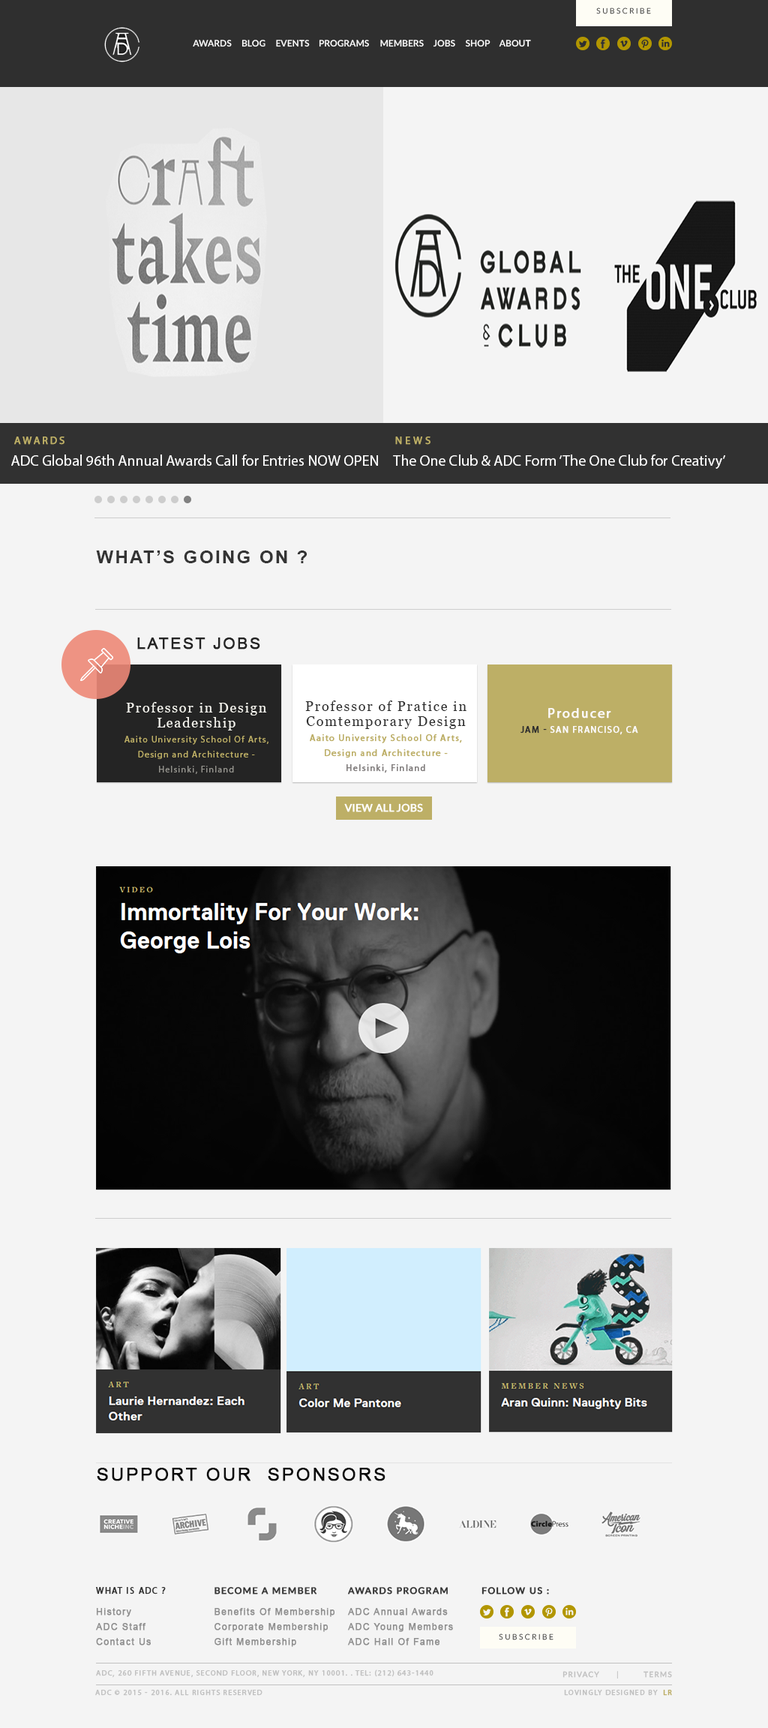
<style>
.page{position:relative;width:768px;height:1728px;background:#f4f4f4}
.page>*{position:absolute;margin:0}
.t1{font:7.5px "Lato-Light";letter-spacing:0.26em;color:#454545;text-transform:uppercase}
.t2{font:9px "Lato-Bold";color:#ffffff;text-transform:uppercase}
.t3{font:10.5px "MyriadPro-Regular";letter-spacing:0.2em;color:#bdaf66;font-weight:bold}
.t4{font:10.5px "MyriadPro-Regular";letter-spacing:0.26em;color:#bdaf66;font-weight:bold}
.t5{font:15px "MyriadPro-Regular";color:#ffffff}
.t6{font:18px "Arial-BoldMT";letter-spacing:0.1em;color:#343434;text-transform:uppercase}
.t7{font:15.8px "ArialMT";letter-spacing:0.1em;color:#242424;text-transform:uppercase;font-weight:bold}
.t8{font:9px/15px "MyriadPro-Regular";letter-spacing:0.1em;color:#bdaf66}
.t9{font:13.5px/15px "Georgia";letter-spacing:0.1em;color:#bdaf66}
.t10{font:13.5px/15px "Georgia";letter-spacing:0.1em;color:#f4f3ed}
.t11{font:9px/15px "MyriadPro-Regular";letter-spacing:0.1em;color:#92918b}
.t12{font:9px/15px "MyriadPro-Regular";letter-spacing:0.1em;color:#bdaf66;font-weight:bold}
.t13{font:13.5px/15px "MyriadPro-Regular";letter-spacing:0.1em;color:#2f2f2f;font-weight:bold}
.t14{font:13.5px/15px "Georgia";letter-spacing:0.1em;color:#2f2f2f}
.t15{font:9px/15px "MyriadPro-Regular";letter-spacing:0.1em;color:#837f7f;font-weight:bold}
.t16{font:9px/15px "MyriadPro-Regular";letter-spacing:0.1em;color:#fbf9f9;text-transform:uppercase;font-weight:bold}
.t17{font:9px/15px "MyriadPro-Regular";letter-spacing:0.1em;color:#2f2f2f;text-transform:uppercase;font-weight:bold}
.t18{font:13.5px/15px "MyriadPro-Regular";letter-spacing:0.1em;color:#fcf9f9;font-weight:bold}
.t19{font:10.5px "Lato-Regular";color:#ffffff;text-transform:uppercase;font-weight:bold}
.t20{font:18px "ArialMT";letter-spacing:0.1em;color:#0b0b0b;text-transform:uppercase;font-weight:bold}
.t21{font:7.5px "MyriadPro-Regular";letter-spacing:0.1em;color:#0b0b0b;text-transform:uppercase;font-weight:bold}
.t22{font:9px "MyriadPro-Regular";letter-spacing:0.1em;color:#343434;text-transform:uppercase;font-weight:bold}
.t23{font:9px "Lato-Regular";letter-spacing:0.1em;color:#343434;text-transform:uppercase;font-weight:bold}
.t24{font:9px/15px "ArialMT";letter-spacing:0.1em;color:#8e8e8e;font-weight:bold}
.t25{font:7.5px "MyriadPro-Regular";letter-spacing:0.1em;color:#c1c1c1;text-transform:uppercase;font-weight:bold}
.t26{font:7.5px "Lato-Regular";letter-spacing:0.1em;color:#c1c1c1;text-transform:uppercase;font-weight:bold}
.t27{font:7.5px "MyriadPro-Regular";letter-spacing:0.1em;color:#bdaf66;text-transform:uppercase;font-weight:bold}
</style>
<div class="page">
<p class="t1" style="left:596px;top:8px;width:55px;height:6px">Subscribe</p>
<p class="t2" style="left:193px;top:40px;width:39px;height:7px">Awards</p>
<p class="t2" style="left:242px;top:40px;width:24px;height:7px">Blog</p>
<p class="t2" style="left:276px;top:40px;width:34px;height:7px">Events</p>
<p class="t2" style="left:319px;top:40px;width:50px;height:7px">Programs</p>
<p class="t2" style="left:380px;top:40px;width:44px;height:7px">Members</p>
<p class="t2" style="left:433px;top:40px;width:22px;height:7px">Jobs</p>
<p class="t2" style="left:465px;top:40px;width:25px;height:7px">Shop</p>
<p class="t2" style="left:499px;top:40px;width:32px;height:7px">About</p>
<p class="t3" style="left:14px;top:436px;width:50px;height:9px"><span class="t4">   </span>AWARDS</p>
<p class="t4" style="left:395px;top:436px;width:35px;height:9px">NEWS</p>
<p class="t5" style="left:11px;top:454px;width:367px;height:12px">ADC Global 96th Annual Awards Call for Entries NOW OPEN</p>
<p class="t5" style="left:393px;top:454px;width:332px;height:15px">The One Club &amp; ADC Form ‘The One Club for Creativy’</p>
<p class="t6" style="left:96px;top:550px;width:212px;height:13px">What’s going on ?</p>
<p class="t7" style="left:137px;top:638px;width:123px;height:12px">Latest jobs</p>
<p class="t8" style="left:124px;top:702px;width:144px;height:72px;text-align:center"><span class="t9"><br></span><span class="t10">Professor in Design <br>Leadership<br></span>Aaito University School Of Arts,  Design and Architecture -<br><span class="t11">Helsinki, Finland</span></p>
<p class="t12" style="left:305px;top:700px;width:161px;height:73px;text-align:center"><span class="t13"><br><br></span><span class="t14">Professor of Pratice in Comtemporary Design<br></span>Aaito University School Of Arts, Design and Architecture -<br><span class="t15">Helsinki, Finland</span></p>
<p class="t16" style="left:520px;top:708px;width:118px;height:27px;text-align:center"><span class="t17"><br><br></span><span class="t18">Producer<br></span><span class="t17">Jam - </span>san franciso, CA</p>
<p class="t19" style="left:344px;top:803px;width:79px;height:9px">View all jobs</p>
<p class="t20" style="left:97px;top:1468px;width:289px;height:13px"><span class="t21"><br><br></span>SUPPORT OUR  SPONSORS</p>
<p class="t22" style="left:96px;top:1587px;width:70px;height:7px">What is ADC ?</p>
<p class="t23" style="left:214px;top:1587px;width:103px;height:7px">Become a member</p>
<p class="t23" style="left:348px;top:1587px;width:100px;height:7px">Awards program</p>
<p class="t23" style="left:482px;top:1587px;width:67px;height:7px">Follow us :</p>
<p class="t24" style="left:96px;top:1608px;width:55px;height:38px">History<br>ADC Staff<br>Contact Us</p>
<p class="t24" style="left:214px;top:1608px;width:121px;height:39px">Benefits Of Membership<br>Corporate Membership<br>Gift Membership</p>
<p class="t24" style="left:348px;top:1608px;width:105px;height:38px">ADC Annual Awards<br>ADC Young Members<br>ADC Hall Of Fame</p>
<p class="t1" style="left:499px;top:1634px;width:55px;height:6px">Subscribe</p>
<p class="t25" style="left:96px;top:1670px;width:338px;height:8px">ADC, 260 fifth avenue, second floor, new york, ny 10001. . tel: (212) 643-1440</p>
<p class="t26" style="left:562px;top:1671px;width:110px;height:8px">PRIVACY | TERMS</p>
<p class="t25" style="left:95px;top:1690px;width:167px;height:6px">ADC © 2015 - 2016. ALL rights reserved</p>
<p class="t25" style="left:564px;top:1690px;width:108px;height:6px">LOVINGLY designed BY <span class="t27"> lr</span></p>
</div>
